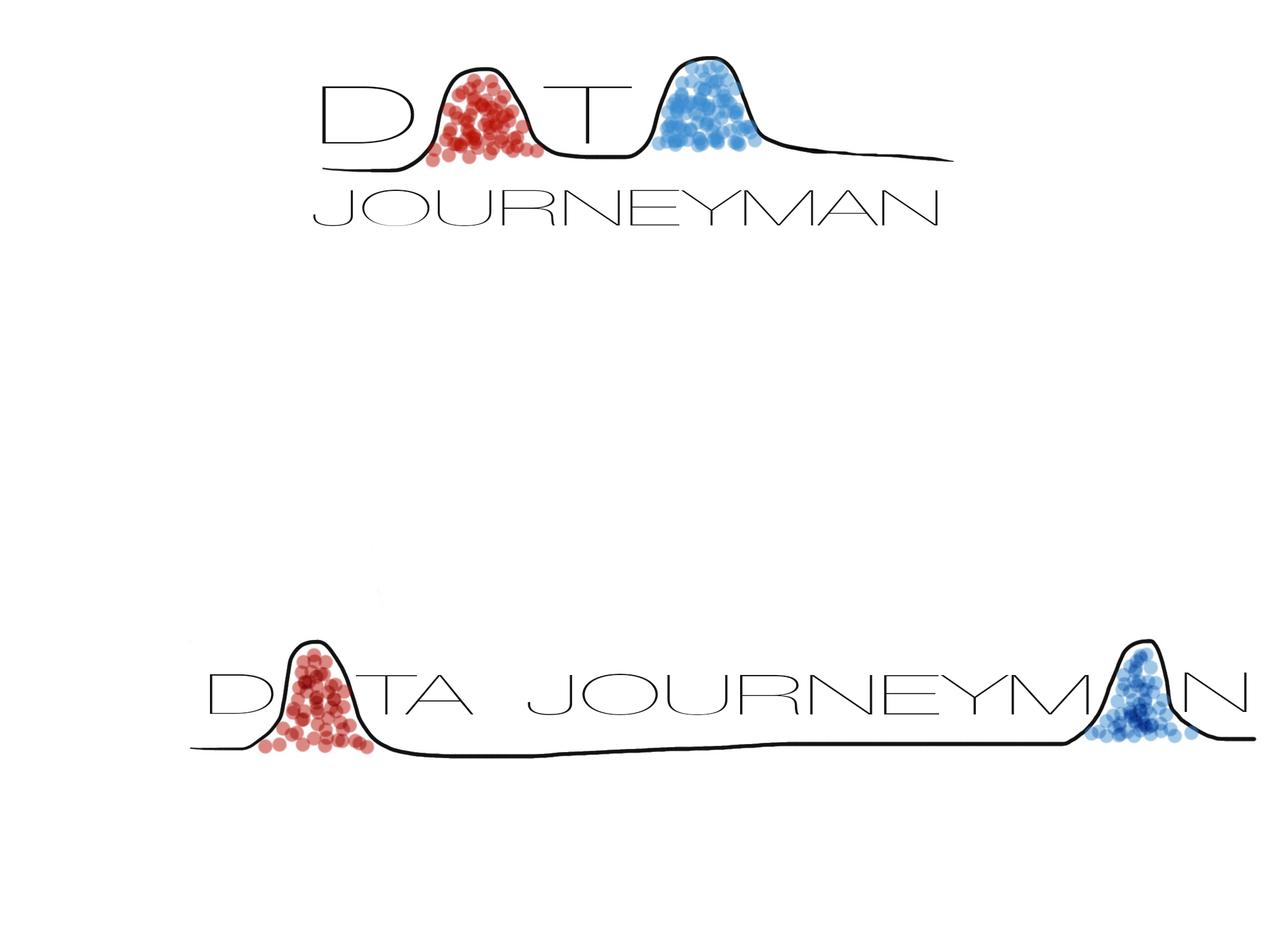
<style>
.page{position:relative;width:1261px;height:946px;background:#ffffff}
.page>*{position:absolute;margin:0}
.t1{font:80px "HelveticaNeue-UltraLight";color:#131313;scale:2.07 1}
.t2{font:49.3px "HelveticaNeue-UltraLight";color:#131313;scale:2.07 1}
.t3{font:55.4px "HelveticaNeue-UltraLight";color:#131313;scale:2.07 1}
</style>
<div class="page">
<p class="t1" style="left:322px;top:86px;width:92px;height:57px">D</p>
<p class="t1" style="left:543px;top:86px;width:89px;height:57px">T</p>
<p class="t2" style="left:313px;top:190px;width:625px;height:36px">JOURNE YMAN</p>
<p class="t3" style="left:210px;top:674px;width:64px;height:40px">D</p>
<p class="t3" style="left:356px;top:674px;width:733px;height:41px">TA JOURNE YM</p>
<p class="t3" style="left:1185px;top:672px;width:62px;height:40px">N</p>
</div>
